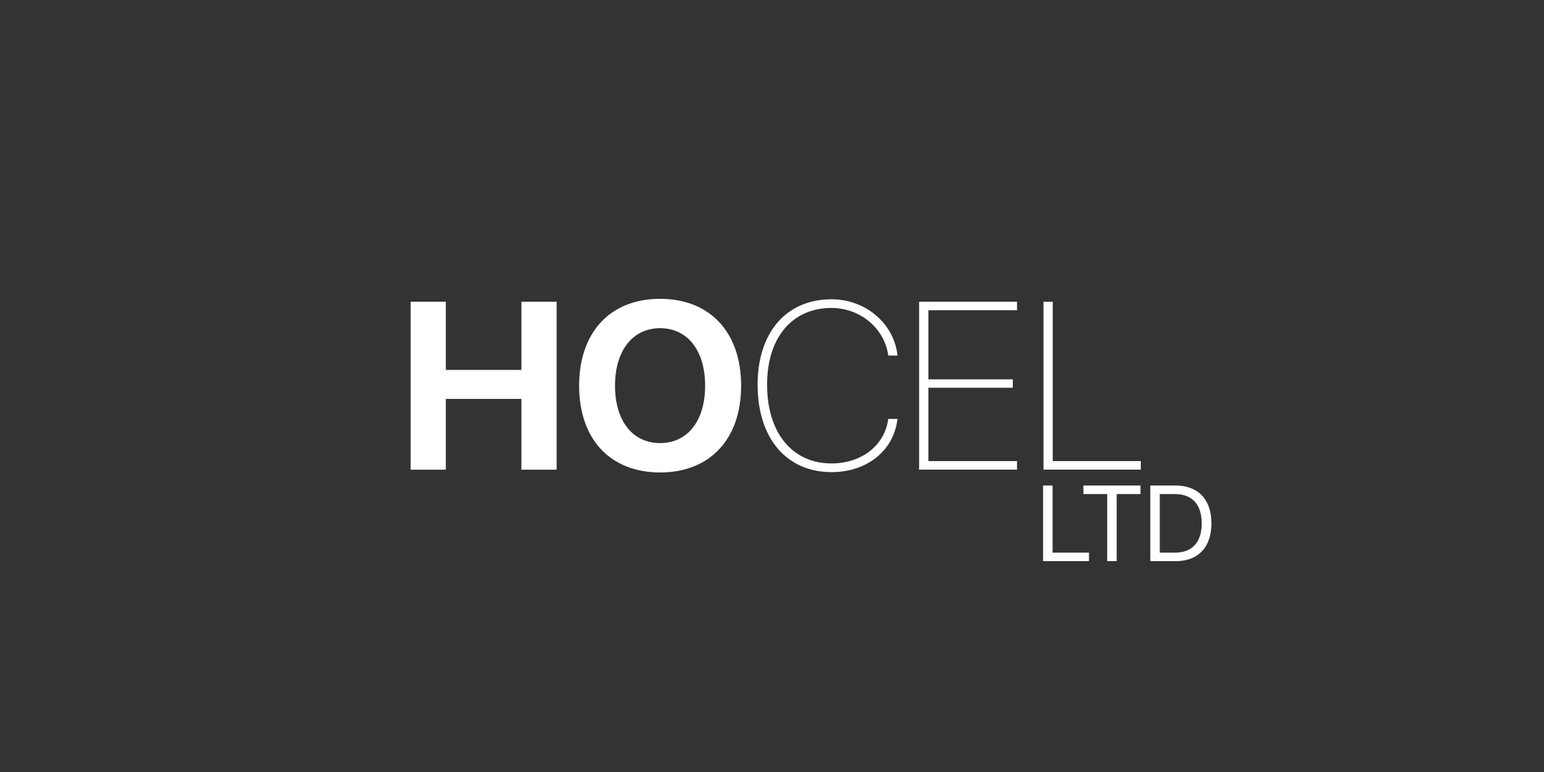
<style>
.page{position:relative;width:1544px;height:772px;background:#333333}
.page>*{position:absolute;margin:0}
.t1{font:238.3px "SFProDisplay-Thin";color:#ffffff}
.t2{font:238.3px "SFProDisplay-Bold";color:#ffffff}
.t3{font:107.2px "SFProDisplay-Regular";color:#ffffff}
</style>
<div class="page">
<p class="t1" style="left:410px;top:299px;width:731px;height:174px"><span class="t2">HO</span>CEL</p>
<p class="t3" style="left:1043px;top:485px;width:169px;height:76px">LTD</p>
</div>
